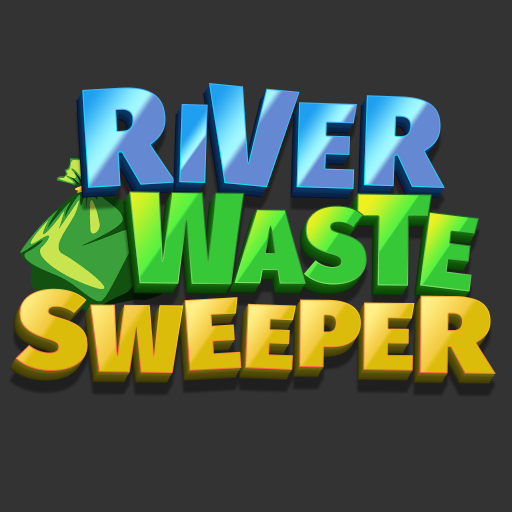
<style>
.page{position:relative;width:512px;height:512px;background:#333333}
.page>*{position:absolute;margin:0}
.t1{font:140.3px "FiraSans-Ultra"}
.t2{font:121.5px "FiraSans-Ultra"}
.t3{font:128.8px "FiraSans-Ultra"}
.t4{font:112px "FiraSans-Ultra"}
.t5{font:131.1px "FiraSans-Ultra"}
.t6{font:105.9px "FiraSans-Ultra"}
.t7{font:106.2px "FiraSans-Ultra"}
.t8{font:110.7px "FiraSans-Ultra";scale:1.09 1}
.t9{font:96.7px "FiraSans-Ultra";scale:1.09 1}
.t10{font:101.5px "FiraSans-Ultra";scale:1.09 1}
.t11{font:92.2px "FiraSans-Ultra";scale:1.09 1}
</style>
<div class="page">
<p class="t1" style="left:82px;top:87px;width:95px;height:101px;rotate:-3deg">R</p>
<p class="t1" style="left:209px;top:83px;width:91px;height:105px;rotate:6deg">V</p>
<p class="t2" style="left:296px;top:102px;width:62px;height:87px;rotate:2deg">E</p>
<p class="t3" style="left:363px;top:95px;width:82px;height:93px;rotate:2deg">R</p>
<p class="t4" style="left:179px;top:103px;width:29px;height:80px;rotate:2deg">I</p>
<p class="t5" style="left:129px;top:191px;width:116px;height:94px;rotate:1deg">W</p>
<p class="t5" style="left:357px;top:193px;width:75px;height:93px;rotate:1deg">T</p>
<p class="t6" style="left:234px;top:209px;width:72px;height:75px;rotate:1deg">A</p>
<p class="t7" style="left:304px;top:205px;width:63px;height:80px;rotate:-2deg">S</p>
<p class="t7" style="left:420px;top:211px;width:60px;height:81px;rotate:7deg">E</p>
<p class="t8" style="left:15px;top:288px;width:73px;height:83px;rotate:1deg">S</p>
<p class="t9" style="left:90px;top:304px;width:94px;height:69px;rotate:1deg">W</p>
<p class="t10" style="left:184px;top:297px;width:58px;height:74px;rotate:-3deg">E</p>
<p class="t11" style="left:245px;top:303px;width:51px;height:67px;rotate:2deg">E</p>
<p class="t9" style="left:299px;top:299px;width:62px;height:69px;rotate:1deg">P</p>
<p class="t9" style="left:363px;top:302px;width:52px;height:69px;rotate:1deg">E</p>
<p class="t8" style="left:419px;top:295px;width:77px;height:79px;rotate:1deg">R</p>
</div>
